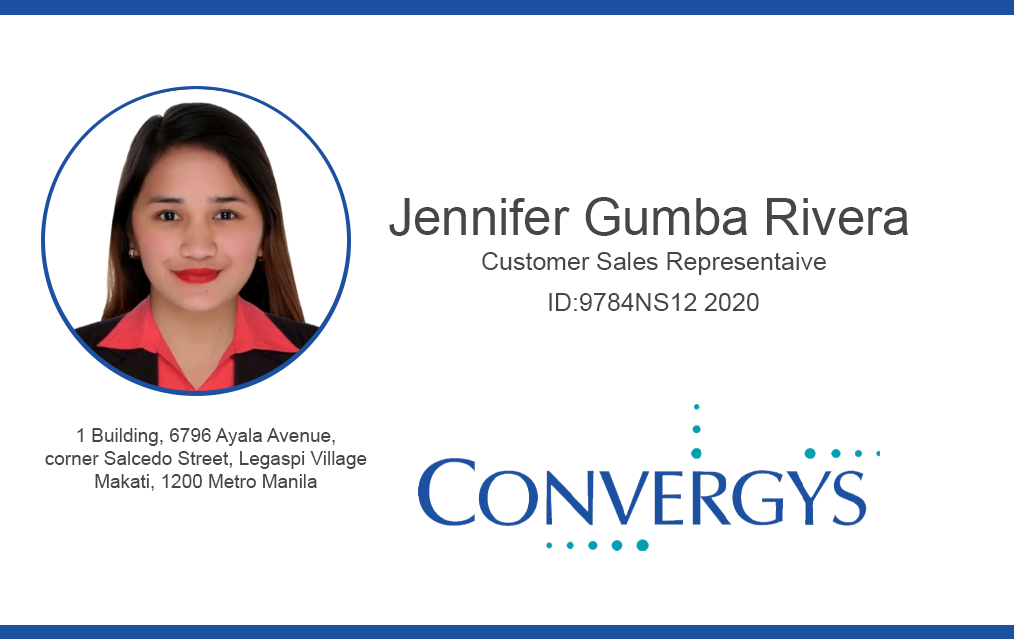
<style>
.page{position:relative;width:1014px;height:639px;background:#ffffff}
.page>*{position:absolute;margin:0}
.t1{font:50.8px "ArialMT";color:#464646}
.t2{font:25px "ArialMT";color:#464646}
.t3{font:19px "ArialMT";color:#464646}
</style>
<div class="page">
<p class="t1" style="left:389px;top:197px;width:519px;height:39px">Jennifer Gumba Rivera</p>
<p class="t2" style="left:482px;top:252px;width:344px;height:23px">Customer Sales Representaive</p>
<p class="t2" style="left:549px;top:293px;width:210px;height:18px">ID:9784NS12 2020</p>
<p class="t3" style="left:45px;top:428px;width:322px;height:63px;text-align:center">1 Building, 6796 Ayala Avenue,<br>corner Salcedo Street, Legaspi Village<br>Makati, 1200 Metro Manila</p>
</div>
